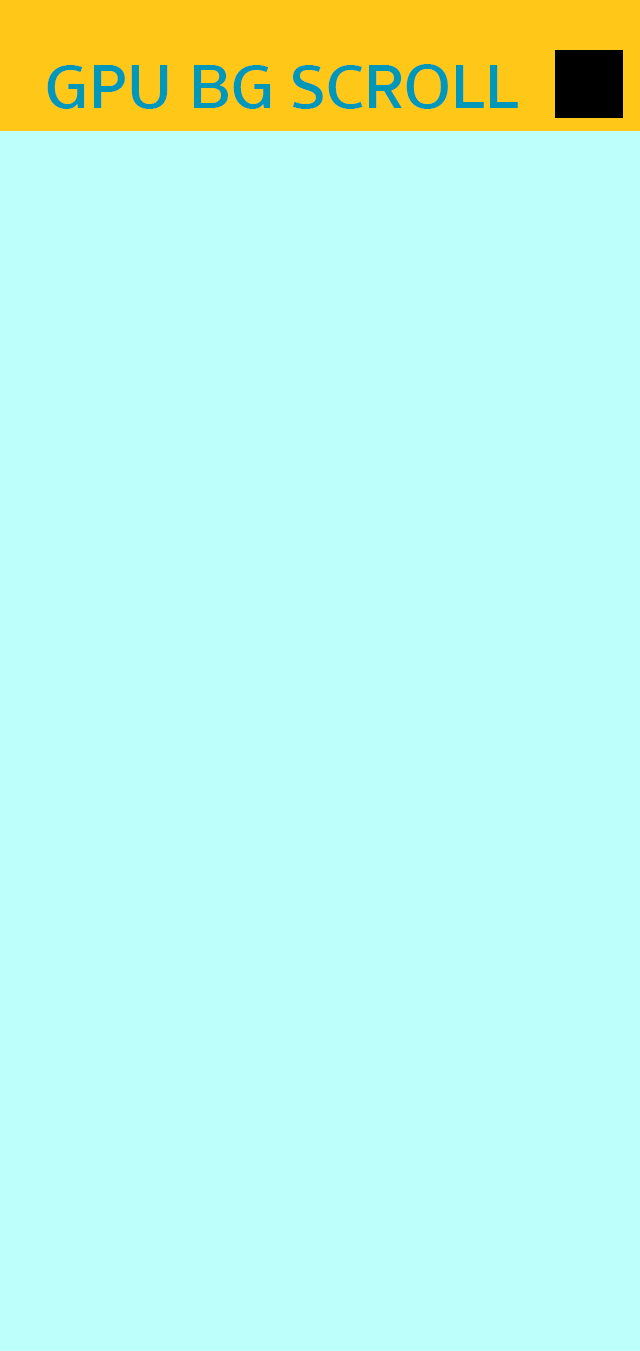
<style>
.page{position:relative;width:640px;height:1351px;background:#bdfffa}
.page>*{position:absolute;margin:0}
.t1{font:63.9px "SukhumvitSet-SemiBold";color:#0097b8;scale:1.05 1}
</style>
<div class="page">
<p class="t1" style="left:47px;top:64px;width:471px;height:45px">GPU BG SCROLL</p>
</div>
